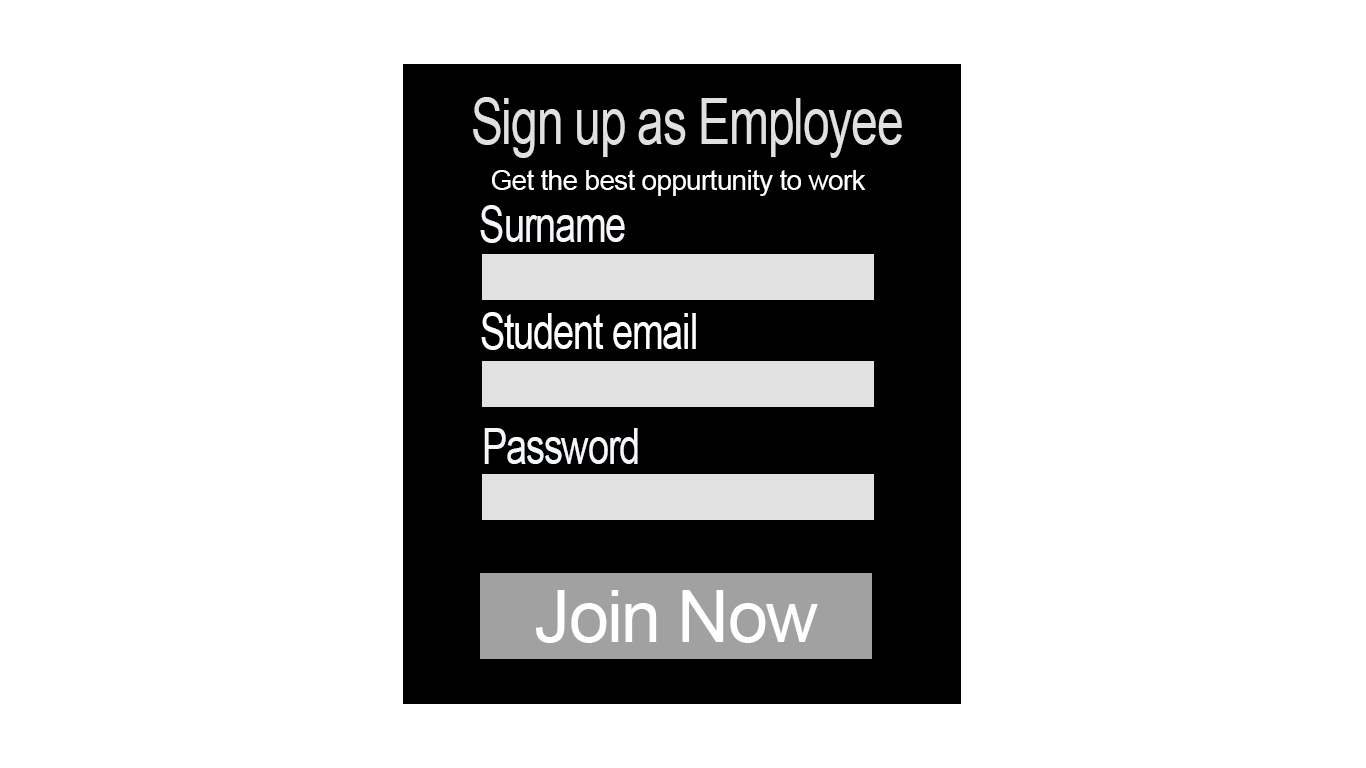
<style>
.page{position:relative;width:1366px;height:768px;background:#ffffff}
.page>*{position:absolute;margin:0}
.t1{font:64px "ArialMT";letter-spacing:-0.025em;color:#e0e0e0;scale:0.75 1}
.t2{font:28px "ArialMT";letter-spacing:-0.025em;color:#ffffff}
.t3{font:50px "ArialMT";letter-spacing:-0.025em;color:#f4f6f9;scale:0.75 1}
.t4{font:50px "ArialMT";letter-spacing:-0.025em;color:#fdfeff;scale:0.75 1}
.t5{font:50px "ArialMT";letter-spacing:-0.025em;color:#f4f7fa;scale:0.75 1}
.t6{font:72px "ArialMT";letter-spacing:-0.025em;color:#ffffff}
</style>
<div class="page">
<p class="t1" style="left:473px;top:97px;width:429px;height:61px">Sign up as Employee</p>
<p class="t2" style="left:492px;top:170px;width:374px;height:26px">Get the best oppurtunity to work</p>
<p class="t3" style="left:480px;top:205px;width:145px;height:38px">Surname</p>
<p class="t4" style="left:481px;top:312px;width:215px;height:38px">Student email</p>
<p class="t5" style="left:484px;top:428px;width:154px;height:36px">Password</p>
<p class="t6" style="left:536px;top:590px;width:282px;height:53px">Join Now</p>
</div>
